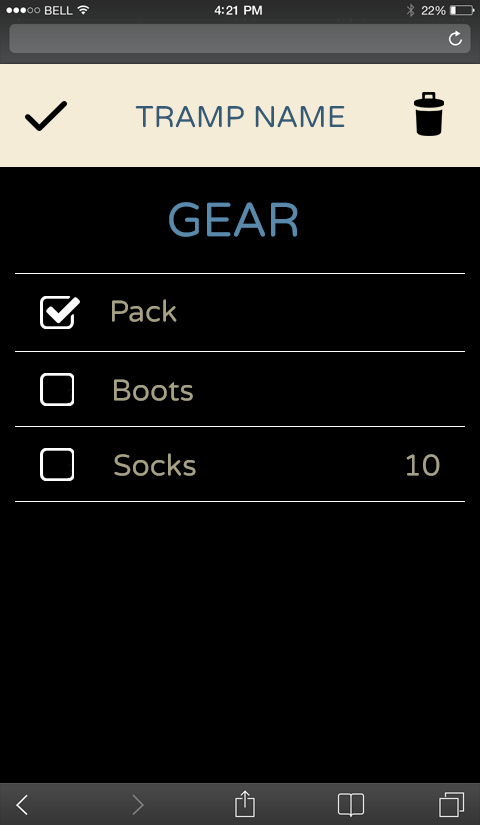
<style>
.page{position:relative;width:480px;height:825px;background:#000000}
.page>*{position:absolute;margin:0}
.t1{font:30px "VarelaRound-Regular";color:#335a76;text-transform:uppercase}
.t2{font:48px "VarelaRound-Regular";color:#598aab;text-transform:uppercase}
.t3{font:30px "VarelaRound-Regular";color:#a6a084}
</style>
<div class="page">
<p class="t1" style="left:135px;top:106px;width:210px;height:22px">TRAMP Name</p>
<p class="t2" style="left:169px;top:202px;width:129px;height:35px">GEAR</p>
<p class="t3" style="left:112px;top:299px;width:65px;height:23px">Pack</p>
<p class="t3" style="left:114px;top:379px;width:79px;height:22px">Boots</p>
<p class="t3" style="left:114px;top:453px;width:82px;height:23px">Socks</p>
<p class="t3" style="left:406px;top:454px;width:34px;height:22px">10</p>
</div>
